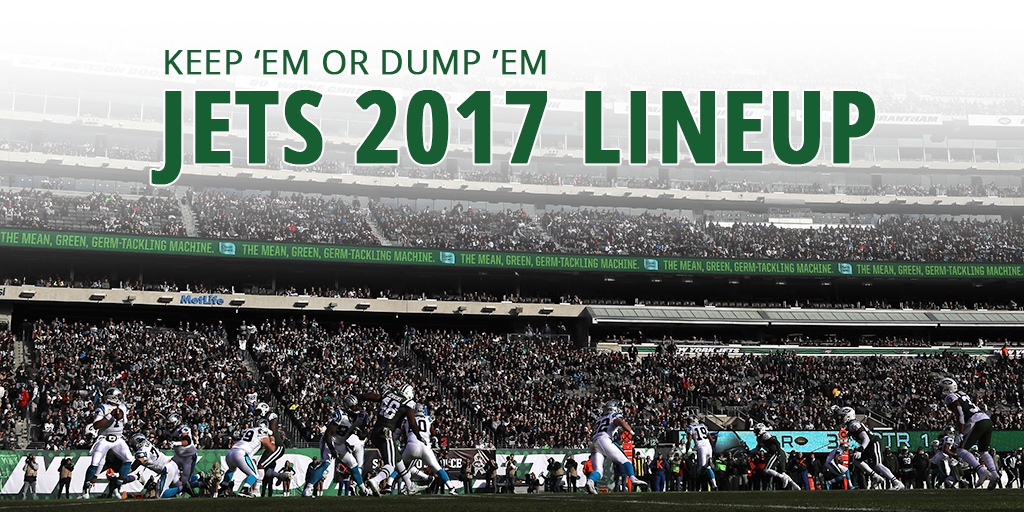
<style>
.page{position:relative;width:1024px;height:512px}
.page>*{position:absolute;margin:0}
.t1{font:33.3px "OpenSans";letter-spacing:0.005em;color:#175e33;text-transform:uppercase;font-weight:bold}
.t2{font:100px "OpenSans-CondensedBold";letter-spacing:0.005em;color:#175e33;text-transform:uppercase;font-weight:bold}
</style>
<div class="page">
<p class="t1" style="left:165px;top:50px;width:381px;height:25px">KEEP ‘EM OR DUMP ’EM</p>
<p class="t2" style="left:151px;top:90px;width:724px;height:95px">JETS 2017 LINEUP</p>
</div>
